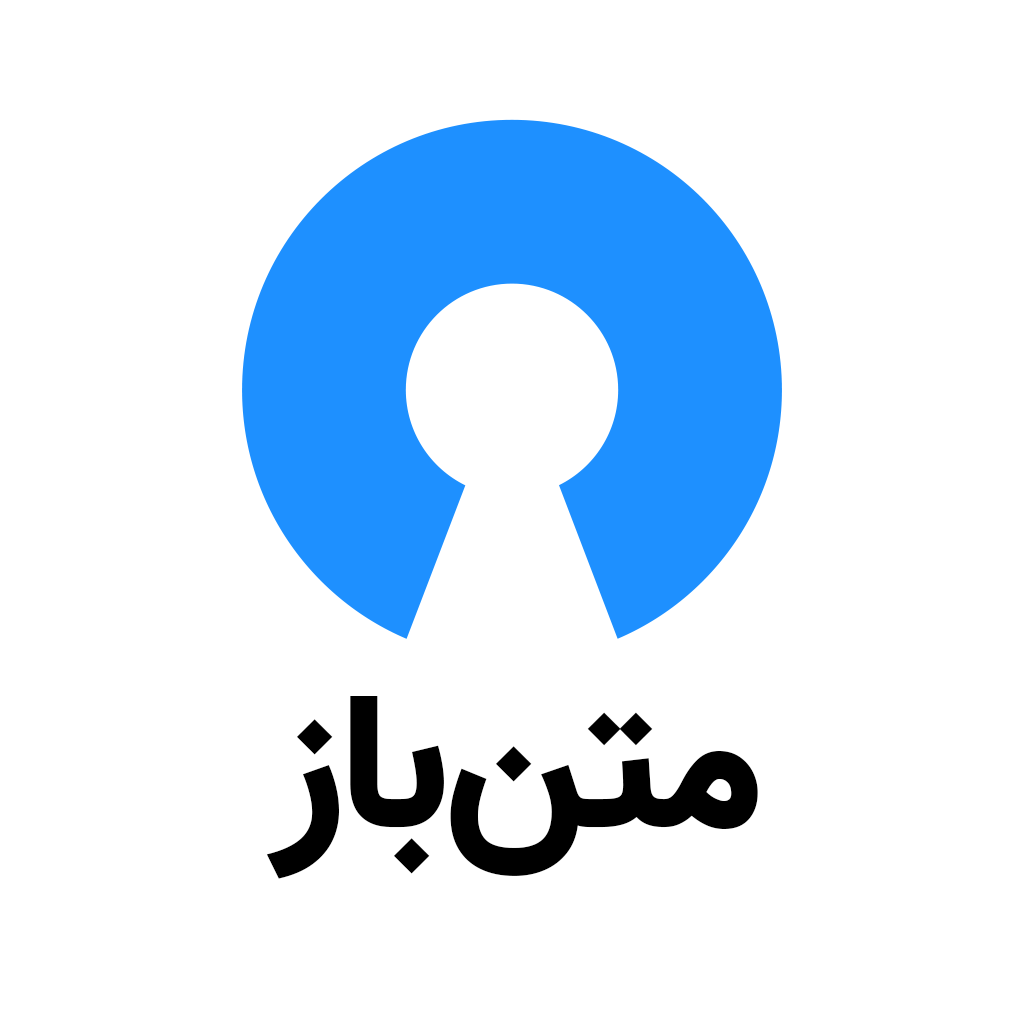
<style>
.page{position:relative;width:1024px;height:1024px;background:#ffffff}
.page>*{position:absolute;margin:0}
.t1{font:192.4px "Vazir-Black";color:#000000}
</style>
<div class="page">
<p class="t1" style="left:266px;top:696px;width:492px;height:183px">متن‌باز</p>
</div>
